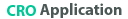
<style>
.page{position:relative;width:128px;height:19px;background:#ffffff}
.page>*{position:absolute;margin:0}
.t1{font:16px "MyriadPro-Bold";color:#00c796}
.t2{font:16px "MyriadPro-Bold";color:#4b5855}
</style>
<div class="page">
<p class="t1" style="left:7px;top:5px;width:29px;height:11px">CRO</p>
<p class="t2" style="left:40px;top:3px;width:82px;height:15px">Application</p>
</div>
